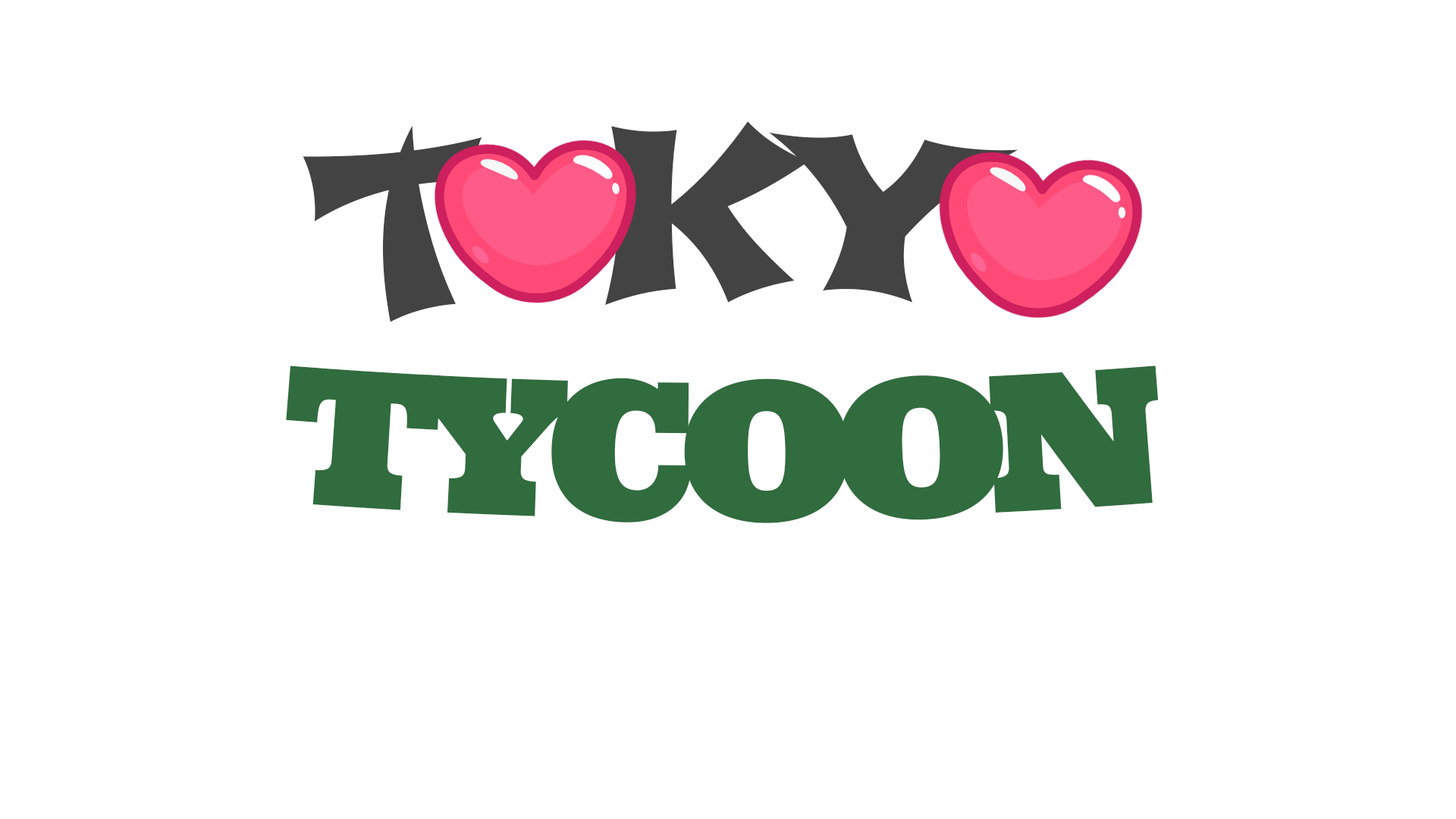
<style>
.page{position:relative;width:1456px;height:819px;background:#ffffff}
.page>*{position:absolute;margin:0}
.t1{font:227.5px "Shojumaru-Regular";letter-spacing:-0.12em;color:#434343}
.t2{font:189.6px "Ultra";letter-spacing:-0.1em;color:#306c3e}
</style>
<div class="page">
<p class="t1" style="left:303px;top:121px;width:715px;height:201px">T  KY</p>
<p class="t2" style="left:286px;top:366px;width:873px;height:157px">TYCOON</p>
</div>
